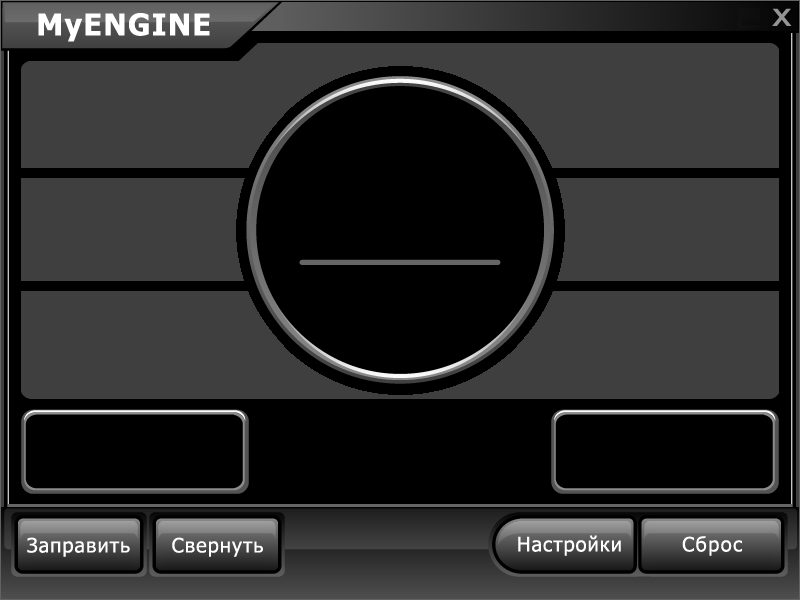
<style>
.page{position:relative;width:800px;height:600px;background:#000000}
.page>*{position:absolute;margin:0}
.t1{font:30px "Tahoma-Bold";letter-spacing:0.05em;color:#ffffff}
.t2{font:20px "Tahoma";letter-spacing:0.05em;color:#ffffff}
.t3{font:20px "Tahoma";letter-spacing:0.075em;color:#ffffff}
</style>
<div class="page">
<p class="t1" style="left:38px;top:13px;width:172px;height:29px">MyENGINE</p>
<p class="t2" style="left:27px;top:537px;width:103px;height:20px">Заправить</p>
<p class="t2" style="left:172px;top:537px;width:91px;height:20px">Свернуть</p>
<p class="t2" style="left:518px;top:535px;width:103px;height:21px">Настройки</p>
<p class="t3" style="left:682px;top:536px;width:60px;height:20px">Сброс</p>
</div>
